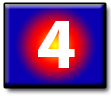
<style>
.page{position:relative;width:111px;height:96px}
.page>*{position:absolute;margin:0}
.t1{font:72px "MyriadPro-Bold";color:#ffffff}
</style>
<div class="page">
<p class="t1" style="left:38px;top:21px;width:37px;height:47px">4</p>
</div>
